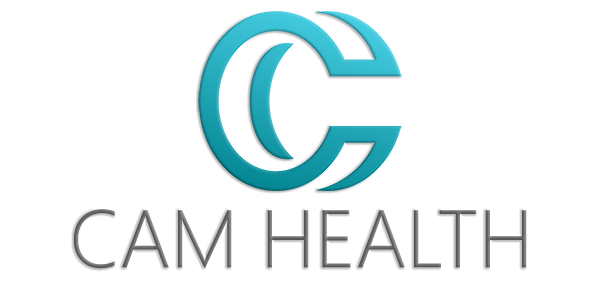
<style>
.page{position:relative;width:600px;height:300px;background:#ffffff}
.page>*{position:absolute;margin:0}
.t1{font:75px "MicrosoftYaHeiLight";color:#707070}
</style>
<div class="page">
<p class="t1" style="left:73px;top:209px;width:454px;height:60px">CAM HEALTH</p>
</div>
